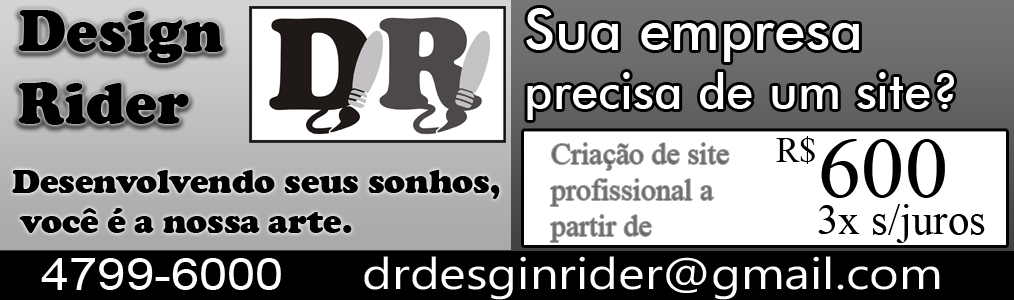
<style>
.page{position:relative;width:1014px;height:300px;background:#000000}
.page>*{position:absolute;margin:0}
.t1{font:60px "CooperBlack";color:#000000}
.t2{font:49.2px "FuturaBT-Medium";color:#ffffff}
.t3{font:56.8px "FuturaBT-Medium";color:#ffffff}
.t4{font:34.5px "IskoolaPota";color:#000000}
.t5{font:30px "IskoolaPota";color:#6f6f6f}
.t6{font:86.3px "IskoolaPota";color:#000000}
.t7{font:33.8px "CooperBlack";color:#000000}
.t8{font:43.1px "IskoolaPota";color:#000000}
.t9{font:43.9px "MicrosoftPhagsPa";color:#fffefe;scale:1.16 1}
.t10{font:43.9px "ArialMT";color:#fffefe;scale:1.16 1}
</style>
<div class="page">
<p class="t1" style="left:18px;top:10px;width:205px;height:115px">Design<br>Rider</p>
<p class="t2" style="left:526px;top:8px;width:428px;height:112px"><span class="t3">Sua empresa</span> <br>precisa de um site?</p>
<p class="t4" style="left:776px;top:136px;width:39px;height:28px">R$</p>
<p class="t5" style="left:550px;top:143px;width:179px;height:99px">Criação de site <br>profissional a <br>partir de</p>
<p class="t6" style="left:821px;top:139px;width:124px;height:59px">600</p>
<p class="t7" style="left:12px;top:170px;width:488px;height:63px">Desenvolvendo seus sonhos,<br> você é a nossa arte.</p>
<p class="t8" style="left:818px;top:204px;width:167px;height:39px">3x s/juros</p>
<p class="t9" style="left:364px;top:256px;width:576px;height:44px">drdesginrider@gmail.com</p>
<p class="t10" style="left:41px;top:258px;width:240px;height:32px">4799-6000</p>
</div>
